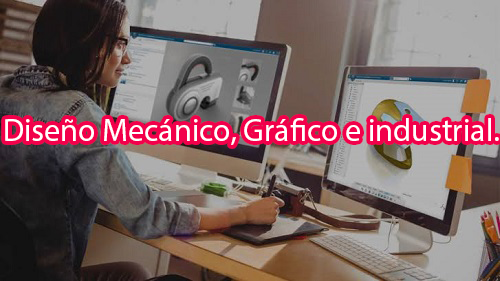
<style>
.page{position:relative;width:500px;height:281px}
.page>*{position:absolute;margin:0}
.t1{font:32px "MyriadPro-Regular";color:#ffffff}
</style>
<div class="page">
<p class="t1" style="left:5px;top:118px;width:494px;height:27px">Diseño Mecánico, Gráfico e industrial.</p>
</div>
